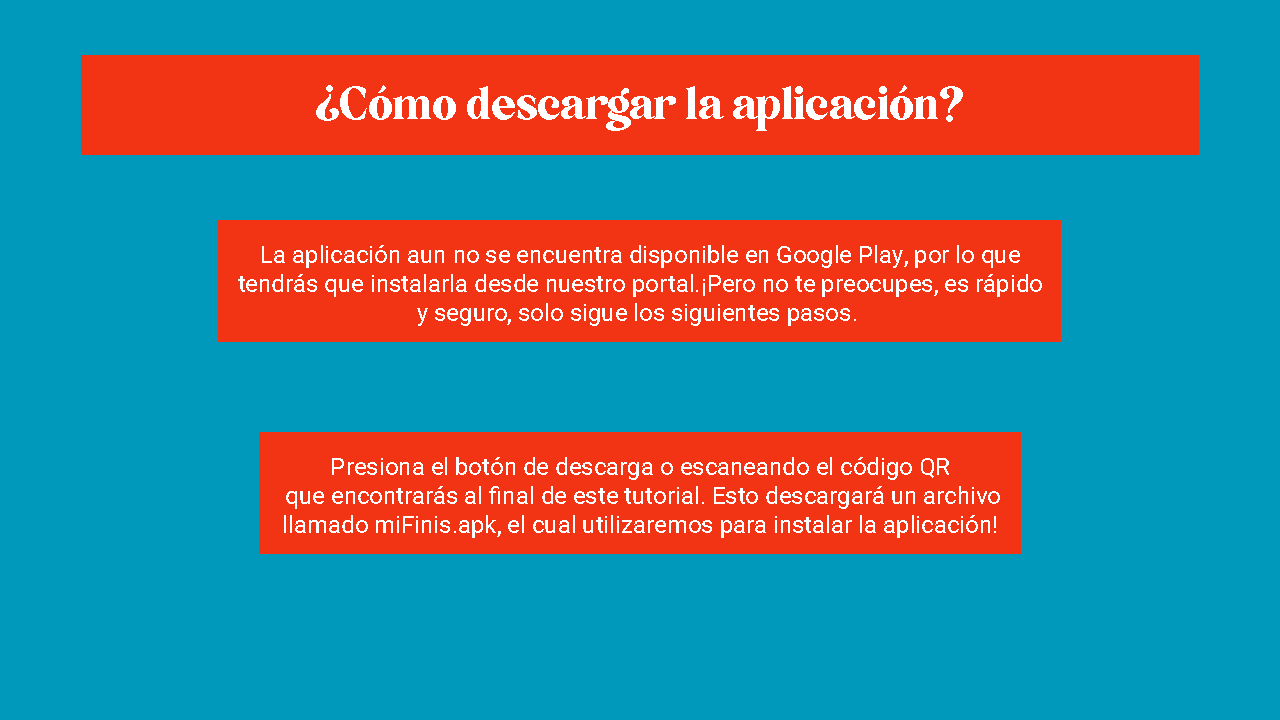
<style>
.page{position:relative;width:1280px;height:720px;background:#0099bb}
.page>*{position:absolute;margin:0}
.t1{font:45px "5thAvenue";color:#ffffff}
.t2{font:24px "Roboto-Regular";color:#ffffff}
</style>
<div class="page">
<p class="t1" style="left:316px;top:85px;width:647px;height:46px">¿Cómo descargar la aplicación?</p>
<p class="t2" style="left:238px;top:245px;width:804px;height:81px;text-align:center">La aplicación aun no se encuentra disponible en Google Play, por lo que<br>tendrás que instalarla desde nuestro portal.¡Pero no te preocupes, es rápido<br>y seguro, solo sigue los siguientes pasos.</p>
<p class="t2" style="left:284px;top:457px;width:716px;height:81px;text-align:center">Presiona el botón de descarga o escaneando el código QR<br> que encontrarás al final de este tutorial. Esto descargará un archivo<br>llamado miFinis.apk, el cual utilizaremos para instalar la aplicación!</p>
</div>
